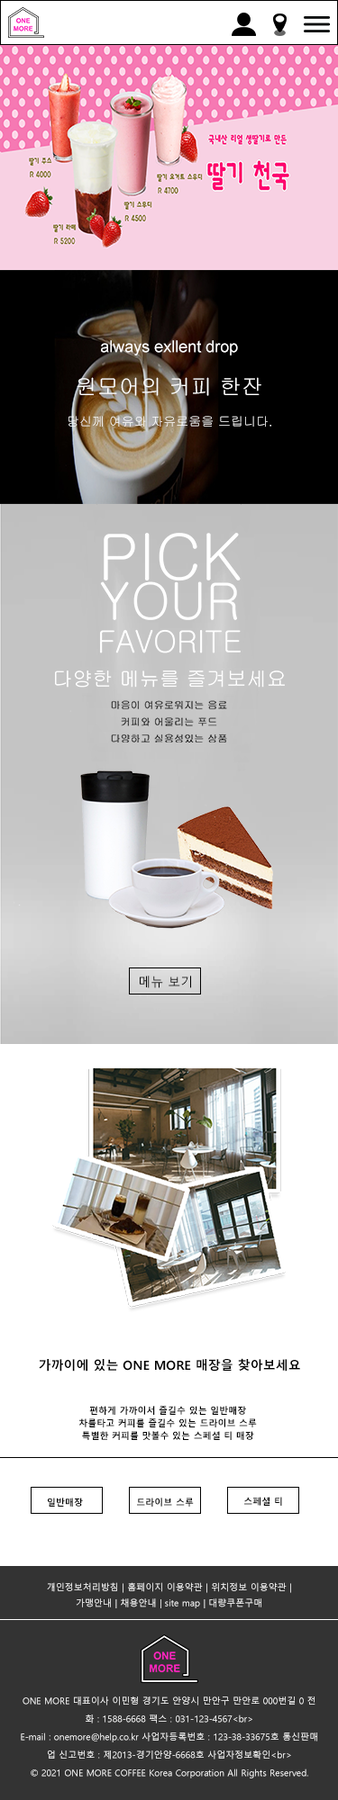
<style>
.page{position:relative;width:338px;height:1800px;background:#ffffff}
.page>*{position:absolute;margin:0}
.t1{font:16.2px "ArialMT";color:#ffffff}
.t2{font:21.6px "Gulim";color:#ffffff}
.t3{font:12.6px "Gulim";color:#ffffff}
.t4{font:12.6px "MalgunGothicRegular";color:#000000}
.t5{font:12.6px "MalgunGothicBold";color:#000000}
.t6{font:9px/12.6px "MalgunGothicBold";color:#000000}
.t7{font:9px "MalgunGothicBold";color:#000000}
.t8{font:9px "MalgunGothicRegular";color:#ffffff}
.t9{font:9px/18px "MalgunGothicRegular";color:#ffffff}
</style>
<div class="page">
<p class="t1" style="left:101px;top:340px;width:137px;height:16px">always exllent drop</p>
<p class="t2" style="left:76px;top:377px;width:185px;height:19px">원모어의 커피 한잔</p>
<p class="t3" style="left:68px;top:416px;width:203px;height:12px">당신께 여유와 자유로움을 드립니다.</p>
<p class="t4" style="left:140px;top:976px;width:51px;height:12px">메뉴 보기</p>
<p class="t5" style="left:39px;top:1358px;width:261px;height:14px">가까이에 있는 ONE MORE 매장을 찾아보세요</p>
<p class="t6" style="left:78px;top:1406px;width:178px;height:34px;text-align:center">편하게 가까이서 즐길수 있는 일반매장<br>차를타고 커피를 즐길수 있는 드라이브 스루<br>특별한 커피를 맛볼수 있는 스페셜 티 매장</p>
<p class="t7" style="left:48px;top:1498px;width:35px;height:9px">일반매장</p>
<p class="t7" style="left:137px;top:1498px;width:57px;height:9px">드라이브 스루</p>
<p class="t7" style="left:244px;top:1497px;width:38px;height:9px">스페셜 티</p>
<p class="t8" style="left:47px;top:1582px;width:244px;height:26px;text-align:center">개인정보처리방침 | 홈페이지 이용약관 | 위치정보 이용약관 |<br>가맹안내 | 채용안내 | site map | 대량쿠폰구매</p>
<p class="t9" style="left:21px;top:1696px;width:296px;height:82px;text-align:center">ONE MORE 대표이사 이민형 경기도 안양시 만안구 만안로 000번길 0 전<br>화 : 1588-6668 팩스 : 031-123-4567&lt;br&gt;<br>E-mail : onemore@help.co.kr 사업자등록번호 : 123-38-33675호 통신판매<br>업 신고번호 : 제2013-경기안양-6668호 사업자정보확인&lt;br&gt;<br>© 2021 ONE MORE COFFEE Korea Corporation All Rights Reserved.</p>
</div>
